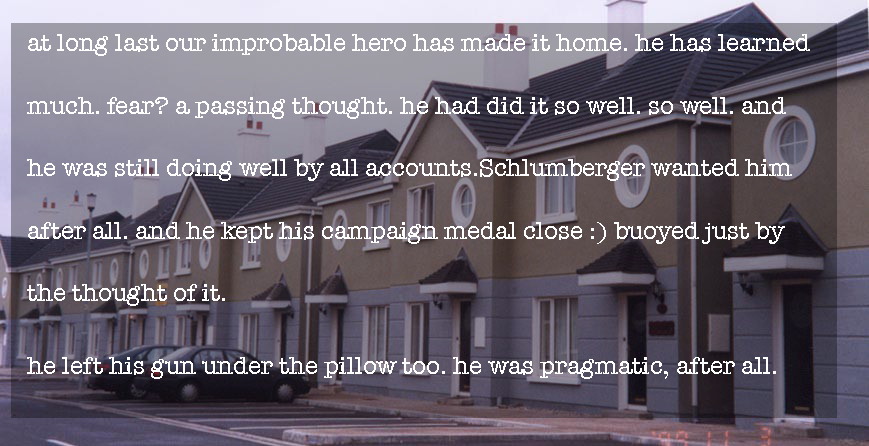
<style>
.page{position:relative;width:869px;height:446px}
.page>*{position:absolute;margin:0}
.t1{font:25px/62.5px "AmericanTypewriter";color:#ffffff}
</style>
<div class="page">
<p class="t1" style="left:27px;top:34px;width:783px;height:345px">at long last our improbable hero has made it home. he has learned much. fear? a passing thought. he had did it so well. so well. and he was still doing well by all accounts.Schlumberger wanted him after all. and he kept his campaign medal close :) buoyed just by the thought of it. <br>he left his gun under the pillow too. he was pragmatic, after all.</p>
</div>
